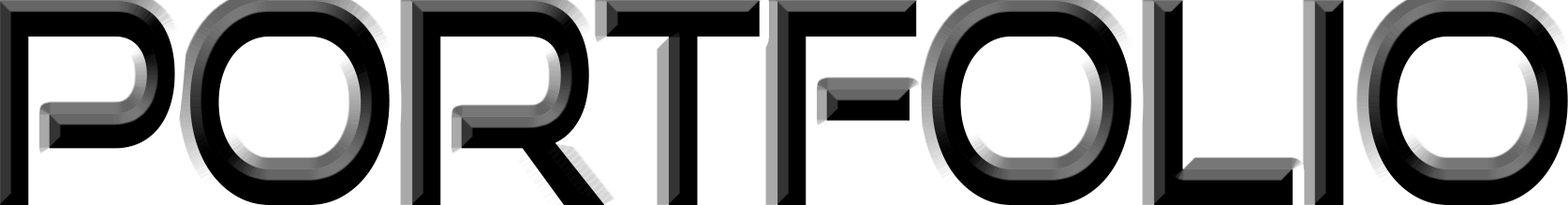
<style>
.page{position:relative;width:1568px;height:205px;background:#ffffff}
.page>*{position:absolute;margin:0}
.t1{font:281px "GoodTimesRg-Regular";color:#000000;scale:0.8 1}
</style>
<div class="page">
<p class="t1" style="left:0px;top:0px;width:1568px;height:205px">Portfolio</p>
</div>
